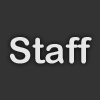
<style>
.page{position:relative;width:100px;height:100px;background:#333333}
.page>*{position:absolute;margin:0}
.t1{font:35.9px "ArialRoundedMTBold";color:#e6e6e6}
</style>
<div class="page">
<p class="t1" style="left:10px;top:37px;width:82px;height:27px">Staff</p>
</div>
